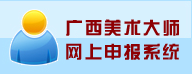
<style>
.page{position:relative;width:192px;height:74px;background:#b0e1ff}
.page>*{position:absolute;margin:0}
.t1{font:17.6px/24.4px "FZZYJW--GB1-0";letter-spacing:0.1em;color:#8d0003}
</style>
<div class="page">
<p class="t1" style="left:66px;top:19px;width:113px;height:41px">广西美术大师<br>网上申报系统</p>
</div>
